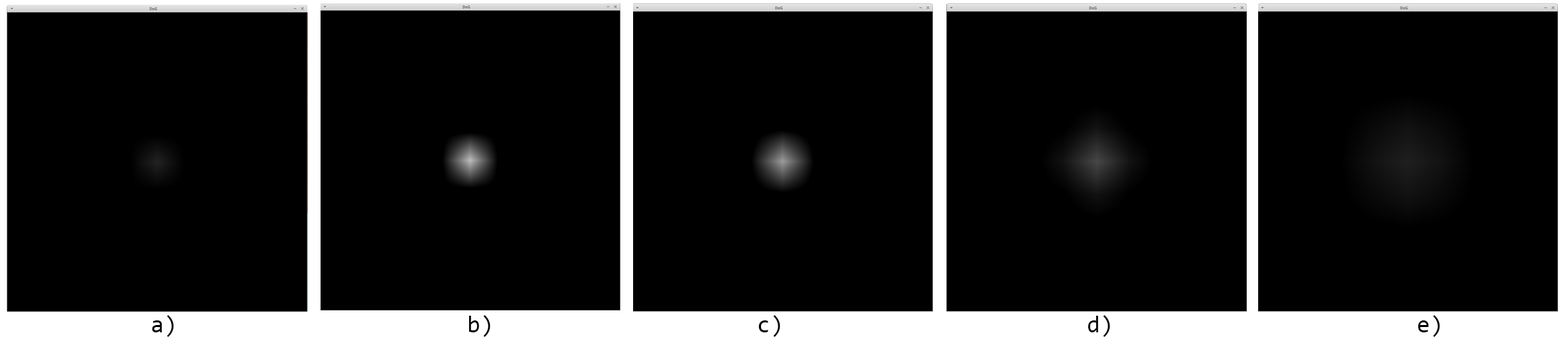
<style>
.page{position:relative;width:1568px;height:359px;background:#000000}
.page>*{position:absolute;margin:0}
.t1{font:24px "Consolas";color:#000000}
</style>
<div class="page">
<p class="t1" style="left:152px;top:315px;width:1288px;height:22px">a)                      b)                    c)                       d)                       e)</p>
</div>
